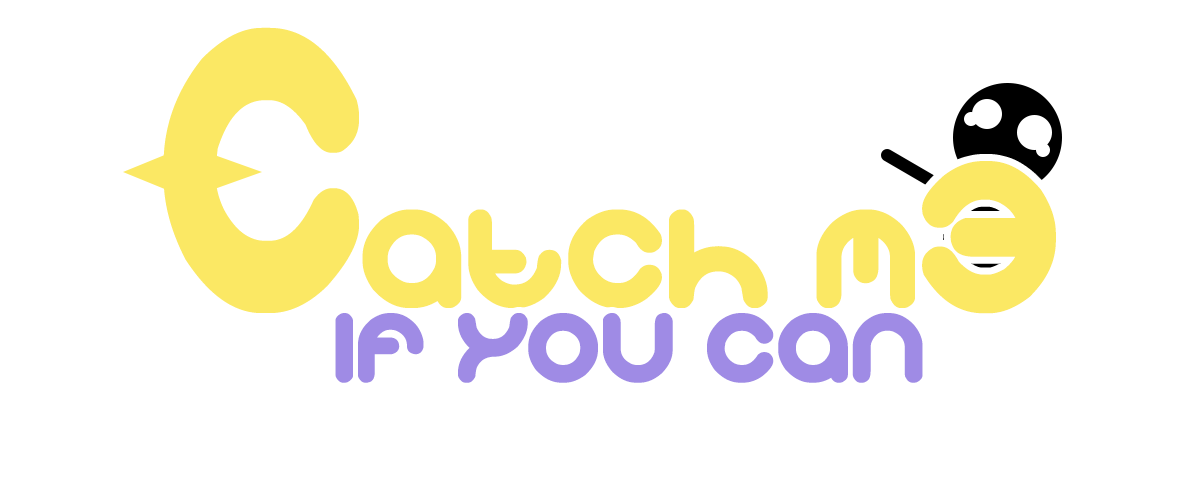
<style>
.page{position:relative;width:1200px;height:500px;background:#ffffff}
.page>*{position:absolute;margin:0}
.t1{font:434.3px "smileyturtle";color:#fbe864;scale:0.72 1}
.t2{font:231.7px "smileyturtle";color:#fbe864;scale:0.93 1}
.t3{font:150px "smileyturtle";color:#fbe864}
.t4{font:105.8px "smileyturtle";color:#9f8be5}
</style>
<div class="page">
<p class="t1" style="left:163px;top:27px;width:196px;height:286px">C</p>
<p class="t2" style="left:922px;top:161px;width:134px;height:153px;rotate:180deg">E</p>
<p class="t3" style="left:362px;top:209px;width:553px;height:99px">atch M</p>
<p class="t4" style="left:335px;top:313px;width:588px;height:70px">IF you can</p>
</div>
